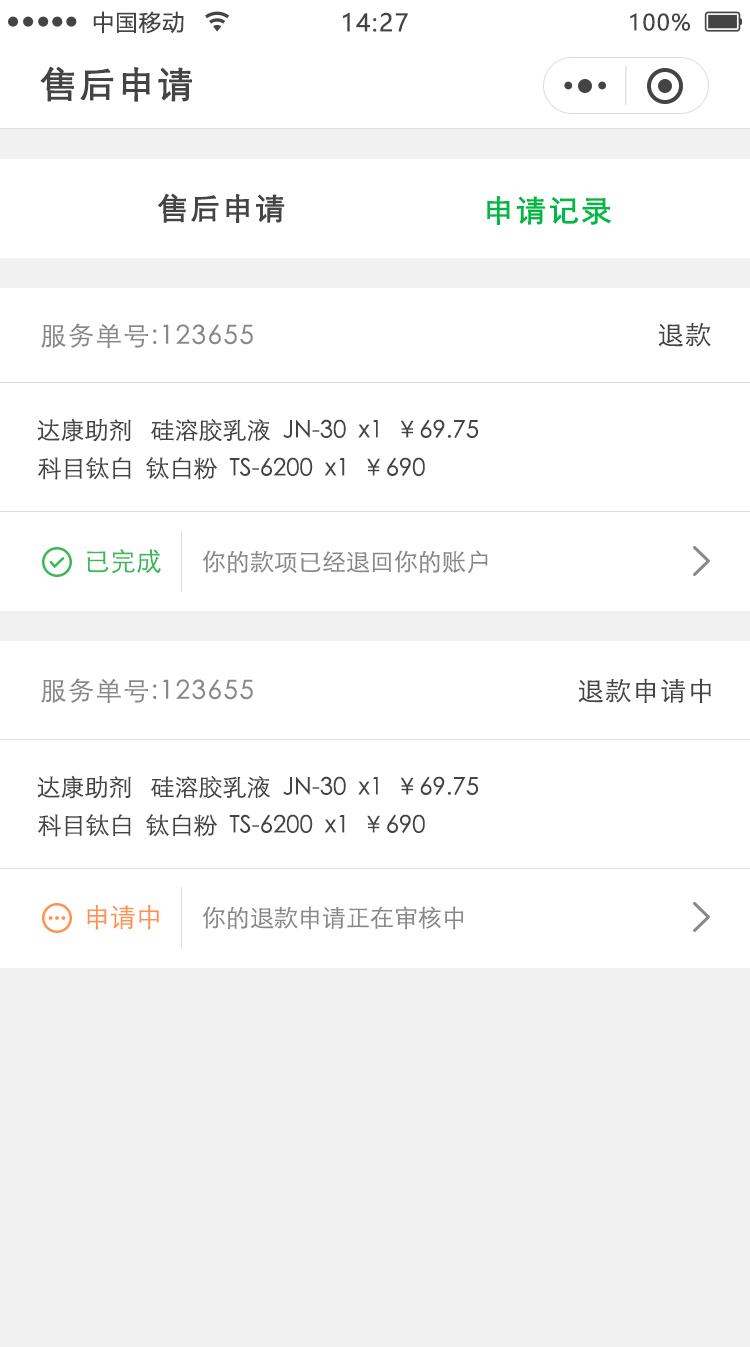
<style>
.page{position:relative;width:750px;height:1347px;background:#ffffff}
.page>*{position:absolute;margin:0}
.t1{font:22px "MicrosoftYaHei";letter-spacing:0.06em;color:#444444}
.t2{font:24px "MicrosoftYaHei";letter-spacing:0.06em;color:#444444}
.t3{font:36px "STXihei";letter-spacing:0.06em;color:#444444;font-weight:bold}
.t4{font:30px "STXihei";letter-spacing:0.06em;color:#444444;font-weight:bold}
.t5{font:30px "STXihei";letter-spacing:0.06em;color:#00b945;font-weight:bold}
.t6{font:26px "STXihei";letter-spacing:0.06em;color:#888888}
.t7{font:26px "STXihei";letter-spacing:0.06em;color:#444444}
.t8{font:24px "STXihei";color:#444444}
.t9{font:26px "STXihei";color:#3db858}
.t10{font:24px "STXihei";color:#888888}
.t11{font:26px "STXihei";color:#ff9250}
</style>
<div class="page">
<p class="t1" style="left:93px;top:11px;width:91px;height:23px">中国移动</p>
<p class="t2" style="left:343px;top:12px;width:65px;height:20px">14:27</p>
<p class="t1" style="left:630px;top:13px;width:60px;height:18px">100%</p>
<p class="t3" style="left:40px;top:66px;width:152px;height:36px">售后申请</p>
<p class="t4" style="left:158px;top:193px;width:127px;height:30px">售后申请</p>
<p class="t5" style="left:487px;top:196px;width:124px;height:29px">申请记录</p>
<p class="t6" style="left:41px;top:323px;width:212px;height:25px">服务单号:123655</p>
<p class="t7" style="left:658px;top:323px;width:53px;height:24px">退款</p>
<p class="t8" style="left:37px;top:418px;width:441px;height:24px">达康助剂   硅溶胶乳液  JN-30  x1  ￥69.75</p>
<p class="t8" style="left:38px;top:457px;width:387px;height:23px">科目钛白  钛白粉  TS-6200  x1  ￥690</p>
<p class="t9" style="left:87px;top:549px;width:74px;height:25px">已完成</p>
<p class="t10" style="left:202px;top:550px;width:286px;height:24px">你的款项已经退回你的账户</p>
<p class="t6" style="left:41px;top:678px;width:212px;height:25px">服务单号:123655</p>
<p class="t7" style="left:578px;top:678px;width:133px;height:25px">退款申请中</p>
<p class="t8" style="left:37px;top:775px;width:441px;height:24px">达康助剂   硅溶胶乳液  JN-30  x1  ￥69.75</p>
<p class="t8" style="left:38px;top:814px;width:387px;height:23px">科目钛白  钛白粉  TS-6200  x1  ￥690</p>
<p class="t11" style="left:87px;top:905px;width:72px;height:25px">申请中</p>
<p class="t10" style="left:202px;top:906px;width:261px;height:24px">你的退款申请正在审核中</p>
</div>
